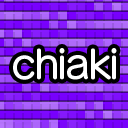
<style>
.page{position:relative;width:128px;height:128px}
.page>*{position:absolute;margin:0}
.t1{font:38.7px "SeuratPro-DB";letter-spacing:-0.05em;color:#ffffff}
</style>
<div class="page">
<p class="t1" style="left:13px;top:48px;width:104px;height:32px">chiaki</p>
</div>
